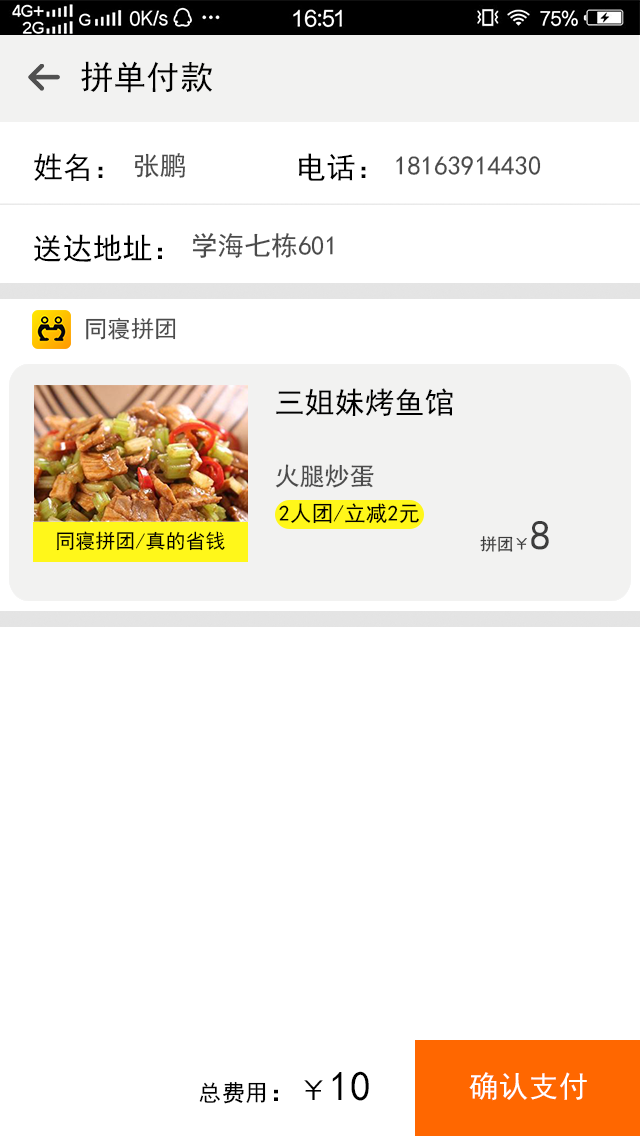
<style>
.page{position:relative;width:640px;height:1136px;background:#ffffff}
.page>*{position:absolute;margin:0}
.t1{font:33.3px "SimHei";letter-spacing:0.002em;color:#000000}
.t2{font:30px "SimHei";letter-spacing:0.002em;color:#000000}
.t3{font:26.7px "SimHei";letter-spacing:0.002em;color:#4b4b4b}
.t4{font:23.3px "SimHei";letter-spacing:0.002em;color:#4b4b4b}
.t5{font:30px "SimHei";letter-spacing:0.002em;color:#010101}
.t6{font:25px "SimHei";letter-spacing:0.002em;color:#4b4b4b}
.t7{font:21.7px "SimHei";letter-spacing:0.002em;color:#000000}
.t8{font:16.7px "SimHei";letter-spacing:0.002em;color:#3c3c3c}
.t9{font:41.7px "SimHei";letter-spacing:0.002em;color:#3c3c3c}
.t10{font:20px "SimHei";letter-spacing:0.002em;color:#000000}
.t11{font:23.3px "SimHei";letter-spacing:0.002em;color:#000000}
.t12{font:41.7px "SimHei";letter-spacing:0.002em;color:#000000}
.t13{font:30px "SimHei";letter-spacing:0.002em;color:#ffffff}
</style>
<div class="page">
<p class="t1" style="left:81px;top:61px;width:131px;height:32px">拼单付款</p>
<p class="t2" style="left:34px;top:153px;width:69px;height:28px">姓名：</p>
<p class="t3" style="left:134px;top:153px;width:51px;height:25px">张鹏</p>
<p class="t2" style="left:299px;top:153px;width:67px;height:28px">电话：</p>
<p class="t3" style="left:396px;top:156px;width:145px;height:19px">18163914430</p>
<p class="t3" style="left:192px;top:233px;width:141px;height:25px">学海七栋601</p>
<p class="t2" style="left:34px;top:234px;width:128px;height:28px">送达地址：</p>
<p class="t4" style="left:86px;top:317px;width:90px;height:23px">同寝拼团</p>
<p class="t5" style="left:276px;top:388px;width:177px;height:28px">三姐妹烤鱼馆</p>
<p class="t6" style="left:275px;top:464px;width:99px;height:24px">火腿炒蛋</p>
<p class="t7" style="left:279px;top:503px;width:140px;height:21px">2人团/立减2元</p>
<p class="t8" style="left:480px;top:521px;width:69px;height:31px">拼团￥<span class="t9">8</span></p>
<p class="t10" style="left:56px;top:531px;width:169px;height:20px">同寝拼团/真的省钱</p>
<p class="t11" style="left:199px;top:1071px;width:170px;height:33px">总费用<span class="t2">：￥</span><span class="t12">10</span></p>
<p class="t13" style="left:469px;top:1072px;width:118px;height:29px">确认支付</p>
</div>
